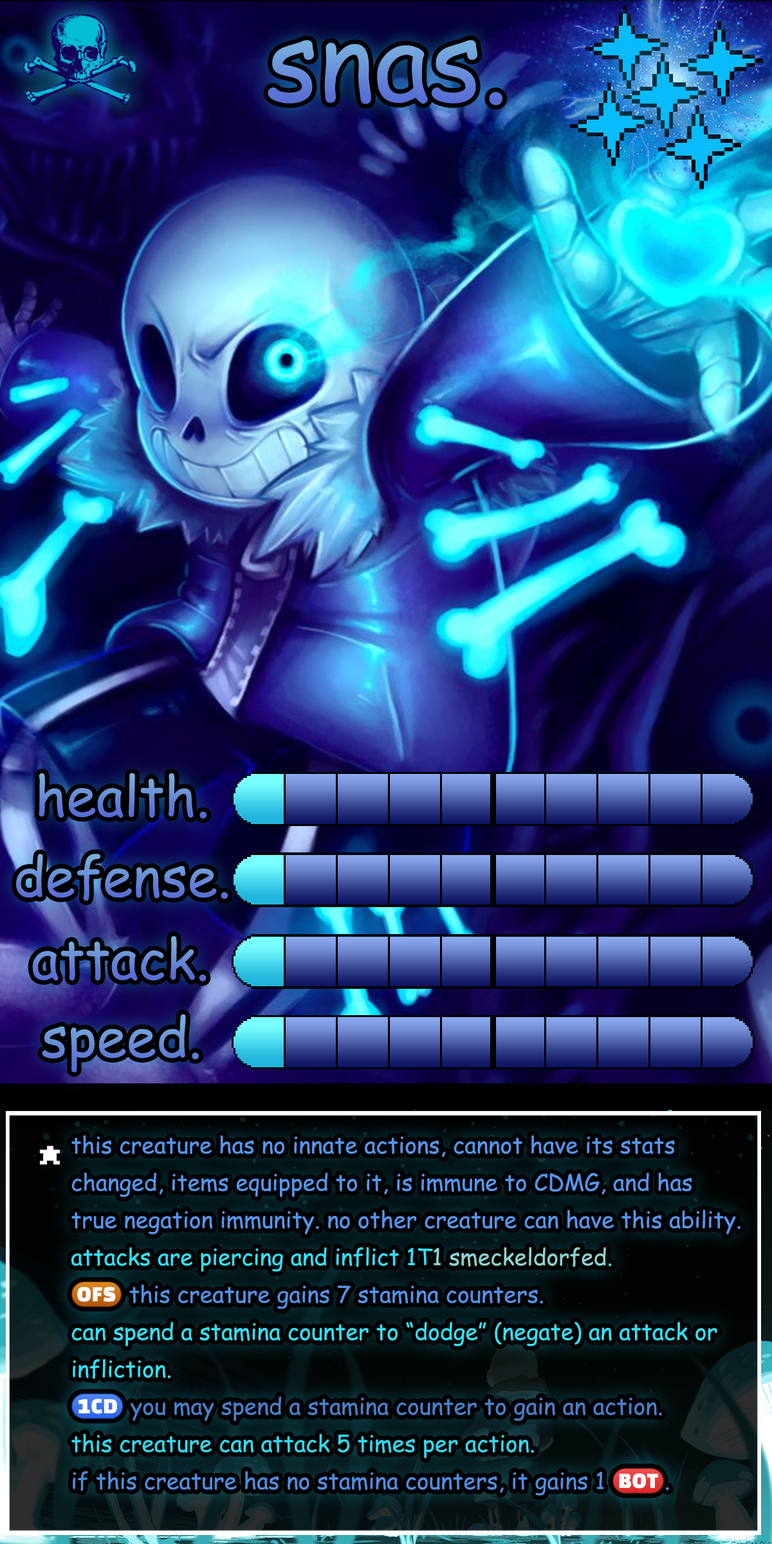
<style>
.page{position:relative;width:772px;height:1544px}
.page>*{position:absolute;margin:0}
.t1{font:184.4px "ComicSansMS"}
.t2{font:93.3px "ComicSansMS"}
.t3{font:93.3px "ComicSansMS";color:#6486d8}
.t4{font:93.3px "ComicSansMS";color:#688dd9}
.t5{font:39.1px/37.3px "ComicSansMS";color:#5596ed}
.t6{font:39.1px/37.3px "ComicSansMS";color:#31e1f7}
.t7{font:39.1px/37.3px "ComicSansMS";color:#8ad2cf}
.t8{font:44.4px/37.3px "stoogedings-Regular";color:#5292e6}
.t9{font:39.1px/37.3px "ComicSansMS";color:#5292e6}
.t10{font:44.4px/37.3px "stoogedings-Regular";color:#487fc9}
.t11{font:39.1px/37.3px "ComicSansMS";color:#487fc9}
.t12{font:39.1px/37.3px "ComicSansMS";color:#30daef}
.t13{font:39.1px/37.3px "ComicSansMS";color:#508ddf}
.t14{font:44.4px/37.3px "stoogedings-Regular";color:#508ddf}
</style>
<div class="page">
<p class="t1" style="left:268px;top:40px;width:235px;height:66px">snas.</p>
<p class="t2" style="left:39px;top:773px;width:168px;height:46px">health.</p>
<p class="t3" style="left:16px;top:854px;width:212px;height:47px">defense.</p>
<p class="t2" style="left:32px;top:936px;width:175px;height:46px">attack.</p>
<p class="t4" style="left:42px;top:1014px;width:157px;height:59px">speed.</p>
<p class="t5" style="left:71px;top:1135px;width:670px;height:361px">this creature has no innate actions, cannot have its stats changed, items equipped to it, is immune to CDMG, and has true negation immunity. no other creature can have this ability.<br><span class="t6">attacks are piercing and inflict 1T</span><span class="t7">1 smeckeldorfed</span><span class="t6">.<br></span><span class="t8">(OFS)</span><span class="t9"> this creature gains 7 stamina counters.<br></span><span class="t6">can spend a stamina counter to “dodge” (negate) an attack or infliction.<br></span><span class="t10">(1CD)</span><span class="t11"> you may spend a stamina counter to gain an action. <br></span><span class="t12">this creature can attack 5 times per action.<br></span><span class="t13">if this creature has no stamina counters, it gains 1 </span><span class="t14">(BOT)</span><span class="t13">.</span></p>
</div>
